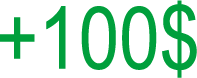
<style>
.page{position:relative;width:197px;height:78px;background:#ffffff}
.page>*{position:absolute;margin:0}
.t1{font:87.1px "ArialMT";color:#009f3c;scale:0.83 1}
</style>
<div class="page">
<p class="t1" style="left:0px;top:0px;width:197px;height:78px">+100$</p>
</div>
